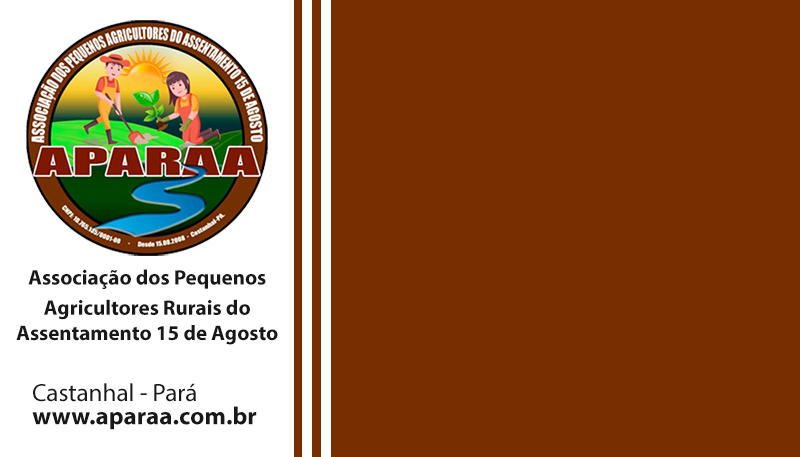
<style>
.page{position:relative;width:800px;height:457px;background:#782f00}
.page>*{position:absolute;margin:0}
.t1{font:21px "MyriadPro-Bold";color:#181818}
.t2{font:25px "MyriadPro-Regular";color:#181818}
.t3{font:25px "MyriadPro-Bold";color:#181818}
</style>
<div class="page">
<p class="t1" style="left:16px;top:269px;width:262px;height:76px;text-align:center">Associação dos Pequenos <br>Agricultores Rurais do <br>Assentamento 15 de Agosto</p>
<p class="t2" style="left:33px;top:383px;width:163px;height:19px">Castanhal - Pará</p>
<p class="t3" style="left:32px;top:406px;width:225px;height:24px">www.aparaa.com.br</p>
</div>
